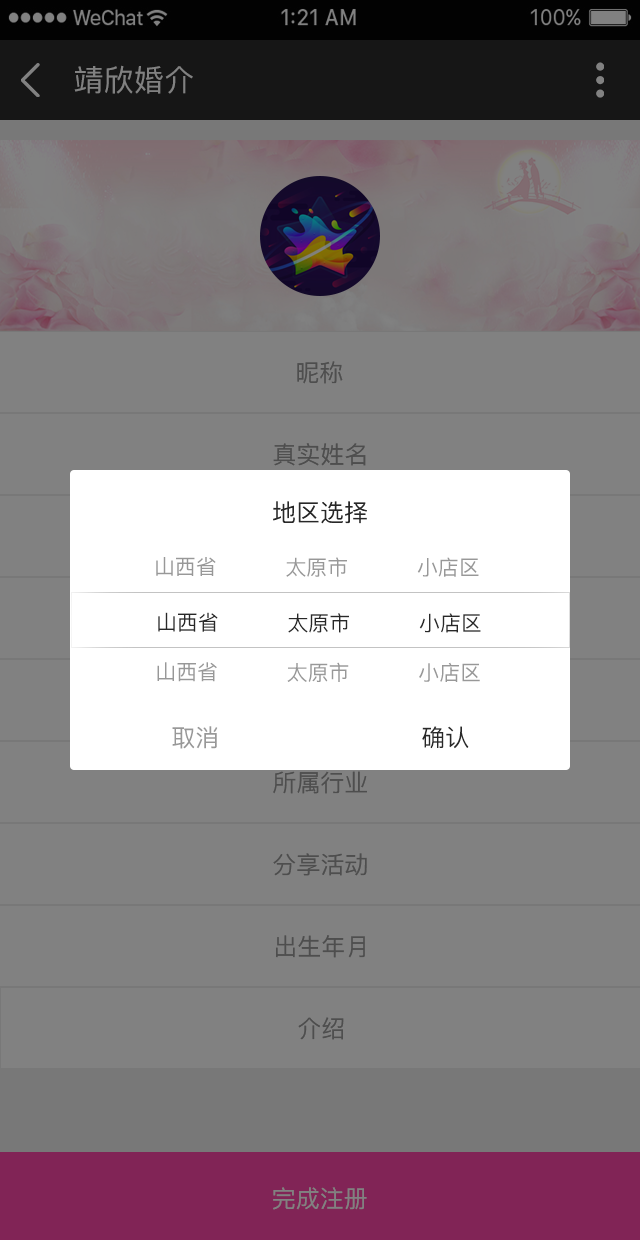
<style>
.page{position:relative;width:640px;height:1240px;background:#818181}
.page>*{position:absolute;margin:0}
.t1{font:30px "PingFang-SC-Medium";letter-spacing:0.01em;color:#818181;text-transform:uppercase}
.t2{font:24px "PingFang-SC-Medium";color:#4e4e4e;text-transform:uppercase}
.t3{font:24px "PingFang-SC-Medium";color:#282828;text-transform:uppercase}
.t4{font:20.9px "PingFang-SC-Medium";color:#989898}
.t5{font:20.9px "PingFang-SC-Medium";color:#282828}
.t6{font:24px "PingFang-SC-Medium";color:#989898;text-transform:uppercase}
.t7{font:24px "PingFang-SC-Medium";color:#818181;text-transform:uppercase}
</style>
<div class="page">
<p class="t1" style="left:74px;top:65px;width:119px;height:29px">靖欣婚介</p>
<p class="t2" style="left:297px;top:361px;width:46px;height:23px">昵称</p>
<p class="t2" style="left:273px;top:443px;width:93px;height:23px">真实姓名</p>
<p class="t3" style="left:273px;top:501px;width:94px;height:23px">地区选择</p>
<p class="t4" style="left:156px;top:557px;width:60px;height:19px">山西省</p>
<p class="t4" style="left:286px;top:557px;width:61px;height:20px">太原市</p>
<p class="t4" style="left:417px;top:557px;width:62px;height:20px">小店区</p>
<p class="t5" style="left:158px;top:612px;width:60px;height:20px">山西省</p>
<p class="t5" style="left:288px;top:613px;width:61px;height:20px">太原市</p>
<p class="t5" style="left:419px;top:613px;width:62px;height:20px">小店区</p>
<p class="t4" style="left:157px;top:662px;width:60px;height:20px">山西省</p>
<p class="t4" style="left:287px;top:662px;width:62px;height:20px">太原市</p>
<p class="t4" style="left:419px;top:662px;width:61px;height:20px">小店区</p>
<p class="t6" style="left:172px;top:726px;width:46px;height:23px">取消</p>
<p class="t3" style="left:422px;top:726px;width:47px;height:23px">确认</p>
<p class="t2" style="left:273px;top:771px;width:94px;height:23px">所属行业</p>
<p class="t2" style="left:273px;top:853px;width:94px;height:23px">分享活动</p>
<p class="t2" style="left:276px;top:935px;width:89px;height:23px">出生年月</p>
<p class="t2" style="left:298px;top:1017px;width:46px;height:23px">介绍</p>
<p class="t7" style="left:273px;top:1187px;width:94px;height:23px">完成注册</p>
</div>
